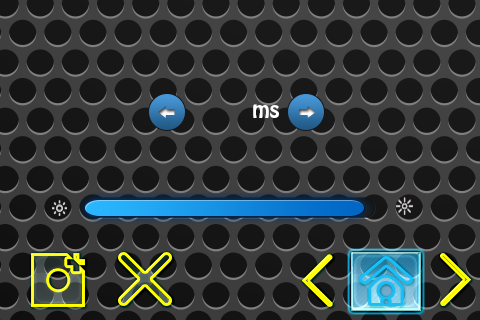
<style>
.page{position:relative;width:480px;height:320px}
.page>*{position:absolute;margin:0}
.t1{font:20px "HoboStd";color:#ffffff}
</style>
<div class="page">
<p class="t1" style="left:253px;top:104px;width:26px;height:14px">ms</p>
</div>
